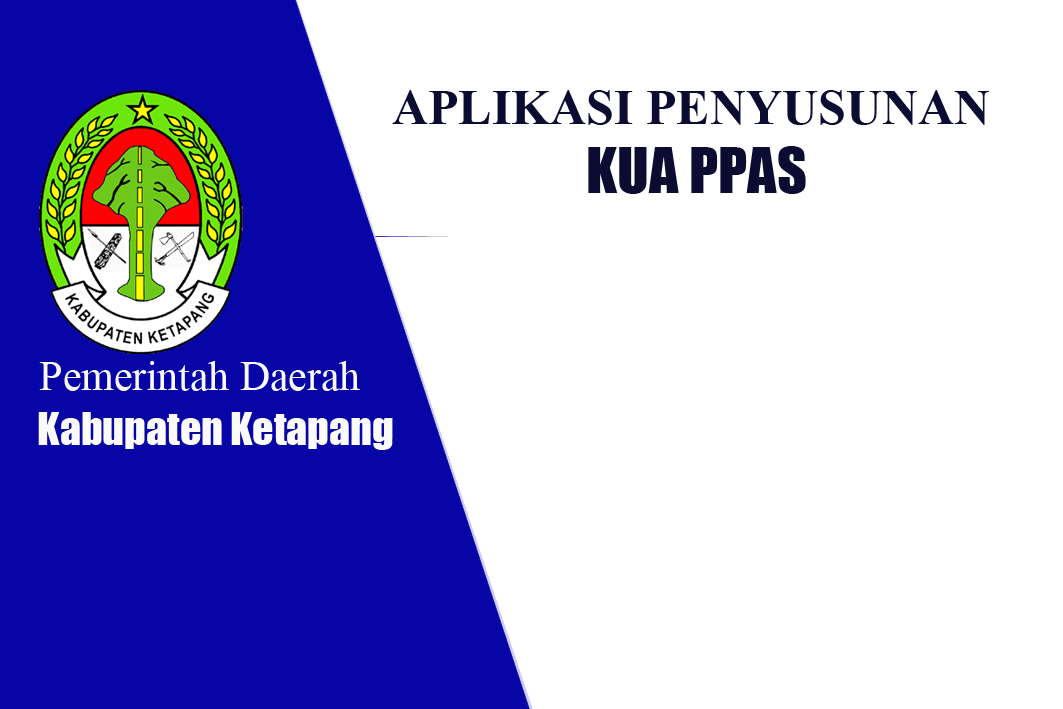
<style>
.page{position:relative;width:1063px;height:709px;background:#ffffff}
.page>*{position:absolute;margin:0}
.t1{font:50px "TimesNewRomanPS-BoldMT";color:#0c0b31}
.t2{font:58.3px "Impact";color:#0c0b31}
.t3{font:41.7px "TimesNewRomanPSMT";color:#fafafb}
.t4{font:41.7px "Impact";color:#fafafb}
</style>
<div class="page">
<p class="t1" style="left:392px;top:90px;width:597px;height:35px">APLIKASI PENYUSUNAN</p>
<p class="t2" style="left:588px;top:146px;width:218px;height:48px">KUA PPAS</p>
<p class="t3" style="left:39px;top:361px;width:321px;height:30px">Pemerintah Daerah</p>
<p class="t4" style="left:38px;top:412px;width:355px;height:38px">Kabupaten Ketapang</p>
</div>
